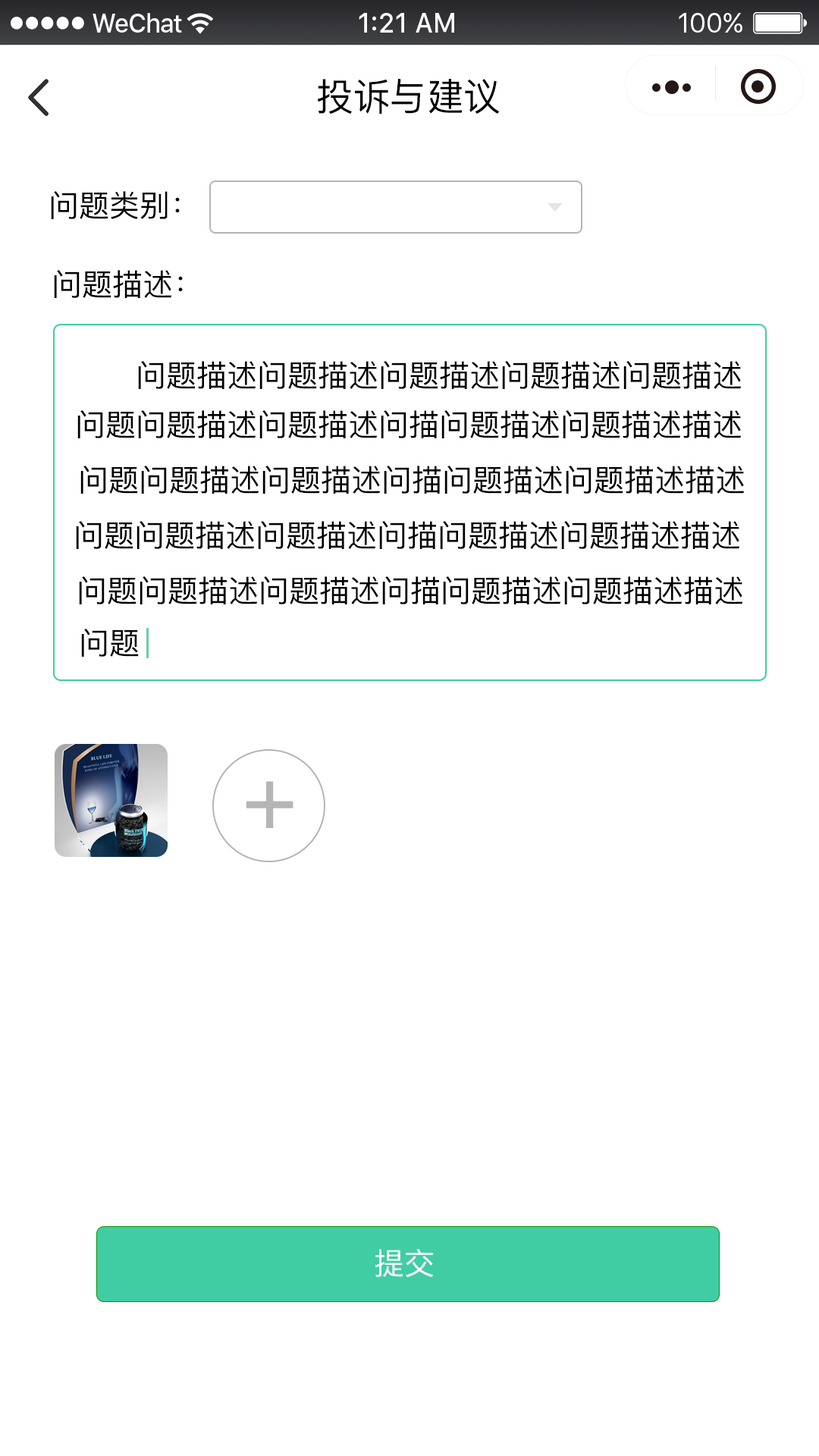
<style>
.page{position:relative;width:819px;height:1456px;background:#ffffff}
.page>*{position:absolute;margin:0}
.t1{font:37.9px "PingFangSC-Regular";color:#000000}
.t2{font:30.3px "PingFangSC-Regular";color:#000000}
.t3{font:91px "PingFangSC-Regular";letter-spacing:0.1em;color:#b5b5b5;font-weight:bold}
.t4{font:30.3px "PingFangSC-Regular";color:#ffffff}
</style>
<div class="page">
<p class="t1" style="left:317px;top:79px;width:183px;height:36px">投诉与建议</p>
<p class="t2" style="left:51px;top:191px;width:129px;height:28px">问题类别：</p>
<p class="t2" style="left:54px;top:270px;width:129px;height:28px">问题描述：</p>
<p class="t2" style="left:138px;top:361px;width:604px;height:28px">问题描述问题描述问题描述问题描述问题描述</p>
<p class="t2" style="left:77px;top:410px;width:665px;height:28px">问题问题描述问题描述问描问题描述问题描述描述</p>
<p class="t2" style="left:80px;top:466px;width:665px;height:28px">问题问题描述问题描述问描问题描述问题描述描述</p>
<p class="t2" style="left:76px;top:521px;width:664px;height:28px">问题问题描述问题描述问描问题描述问题描述描述</p>
<p class="t2" style="left:79px;top:576px;width:664px;height:28px">问题问题描述问题描述问描问题描述问题描述描述</p>
<p class="t2" style="left:81px;top:629px;width:58px;height:28px">问题</p>
<p class="t3" style="left:246px;top:781px;width:47px;height:47px">+</p>
<p class="t4" style="left:375px;top:1249px;width:59px;height:28px">提交</p>
</div>
